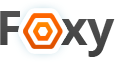
<style>
.page{position:relative;width:115px;height:62px;background:#ffffff}
.page>*{position:absolute;margin:0}
.t1{font:48px "OpenSans-Bold";letter-spacing:-0.05em;color:#4e4e4e}
</style>
<div class="page">
<p class="t1" style="left:0px;top:11px;width:115px;height:46px">F    xy</p>
</div>
